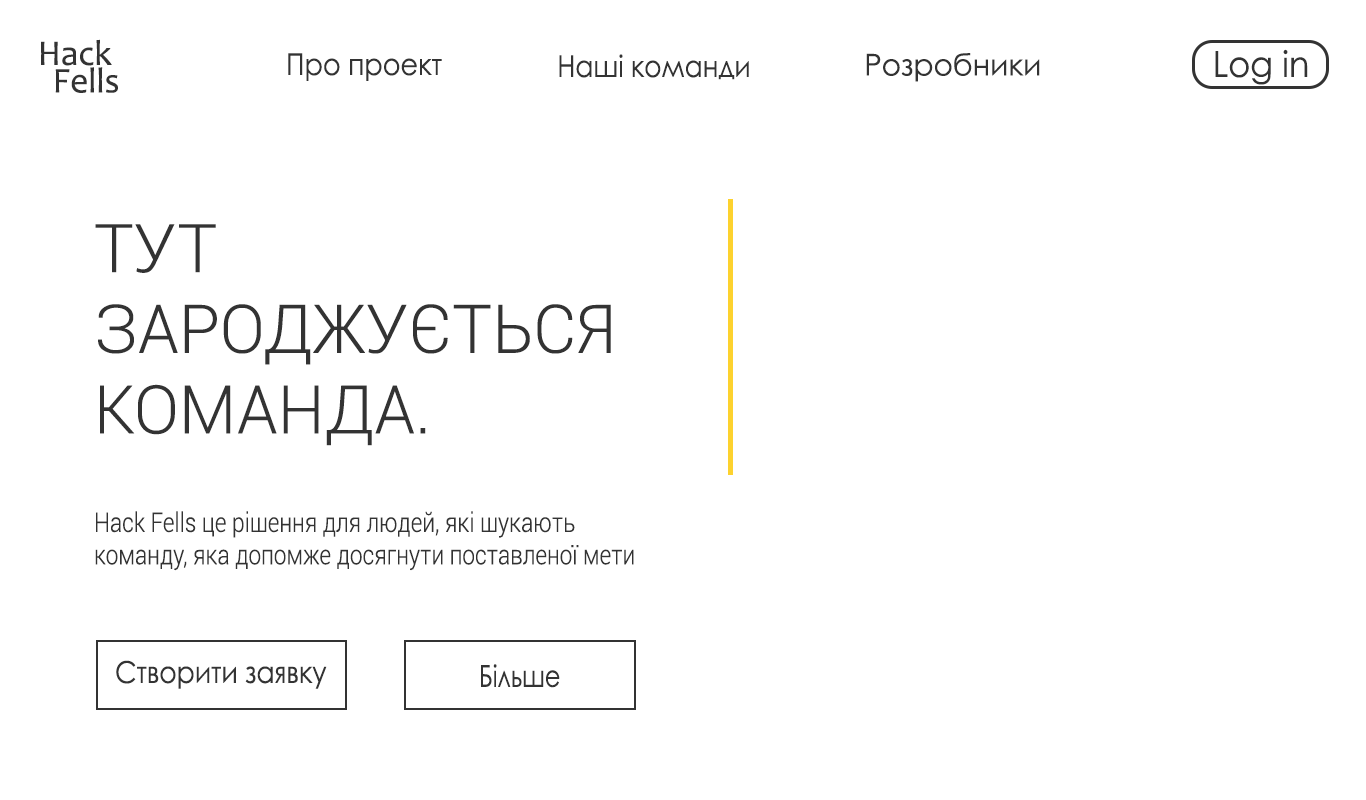
<style>
.page{position:relative;width:1366px;height:800px;background:#ffffff}
.page>*{position:absolute;margin:0}
.t1{font:36px/27.5px "Candara";color:#333333}
.t2{font:30px "CenturyGothic";color:#333333;scale:0.9 1}
.t3{font:30px "CenturyGothic";color:#333333;scale:0.88 1}
.t4{font:30px "CenturyGothic";color:#333333}
.t5{font:36px "CenturyGothic";color:#333333;scale:0.93 1}
.t6{font:67.2px "Roboto-Light";color:#333333}
.t7{font:27px "Roboto-Light";color:#333333;scale:0.84 1}
.t8{font:30px "CenturyGothic";color:#333333;scale:0.89 1}
.t9{font:30px "CenturyGothic";color:#333333;scale:0.8 1}
</style>
<div class="page">
<p class="t1" style="left:41px;top:39px;width:77px;height:54px;text-align:right">Hack <br>Fells</p>
<p class="t2" style="left:288px;top:53px;width:154px;height:28px">Про проект</p>
<p class="t3" style="left:559px;top:54px;width:190px;height:26px">Наші команди</p>
<p class="t4" style="left:866px;top:53px;width:174px;height:29px">Розробники</p>
<p class="t5" style="left:1215px;top:49px;width:93px;height:36px">Log in</p>
<p class="t6" style="left:95px;top:224px;width:516px;height:222px">ТУТ<br>ЗАРОДЖУЄТЬСЯ<br>КОМАНДА.</p>
<p class="t7" style="left:95px;top:511px;width:539px;height:60px">Hack Fells це рішення для людей, які шукають  <br>команду, яка допомже досягнути поставленої мети</p>
<p class="t8" style="left:116px;top:660px;width:211px;height:29px">Створити заявку</p>
<p class="t9" style="left:481px;top:664px;width:79px;height:24px">Більше</p>
</div>
